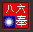
<style>
.page{position:relative;width:33px;height:32px;background:#f20000}
.page>*{position:absolute;margin:0}
.t1{font:10.4px "SimSun";color:#ffffff}
.t2{font:11.7px "SimSun";color:#ffffff}
</style>
<div class="page">
<p class="t1" style="left:6px;top:4px;width:19px;height:9px">八六</p>
<p class="t2" style="left:16px;top:15px;width:11px;height:12px">奉</p>
</div>
